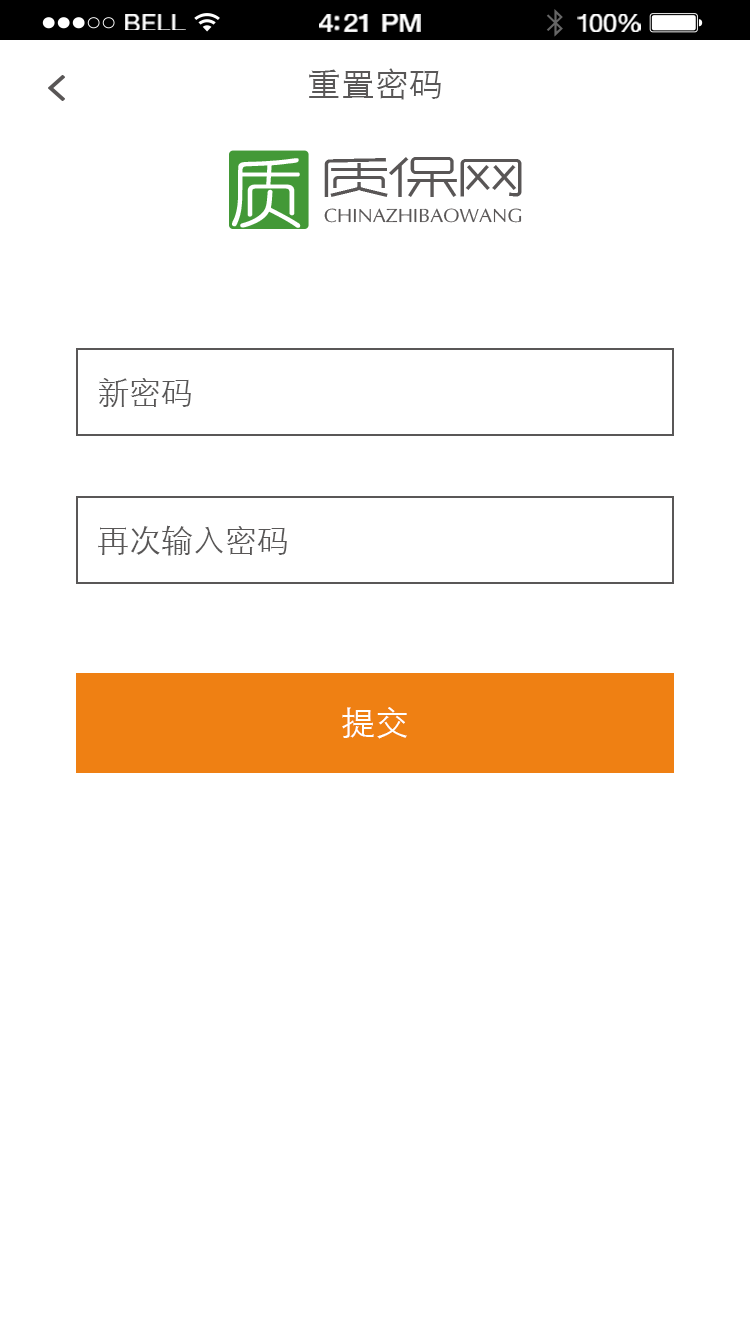
<style>
.page{position:relative;width:750px;height:1334px;background:#ffffff}
.page>*{position:absolute;margin:0}
.t1{font:23.3px "HelveticaNeue";letter-spacing:0.02em;color:#ffffff;scale:1.06 1}
.t2{font:25.3px "HelveticaNeue-Medium";letter-spacing:-0.02em;color:#ffffff;scale:1.06 1}
.t3{font:24.3px "HelveticaNeue";letter-spacing:-0.02em;color:#ffffff;scale:1.06 1}
.t4{font:34px "STXihei";color:#595757}
.t5{font:32px "STXihei";color:#595757}
.t6{font:34px "STXihei";color:#ffffff}
</style>
<div class="page">
<p class="t1" style="left:125px;top:14px;width:61px;height:16px">BELL</p>
<p class="t2" style="left:319px;top:14px;width:102px;height:18px">4:21 PM</p>
<p class="t3" style="left:577px;top:14px;width:64px;height:18px">100%</p>
<p class="t4" style="left:309px;top:68px;width:132px;height:32px">重置密码</p>
<p class="t5" style="left:99px;top:378px;width:92px;height:29px">新密码</p>
<p class="t5" style="left:98px;top:525px;width:189px;height:31px">再次输入密码</p>
<p class="t6" style="left:342px;top:707px;width:65px;height:32px">提交</p>
</div>
